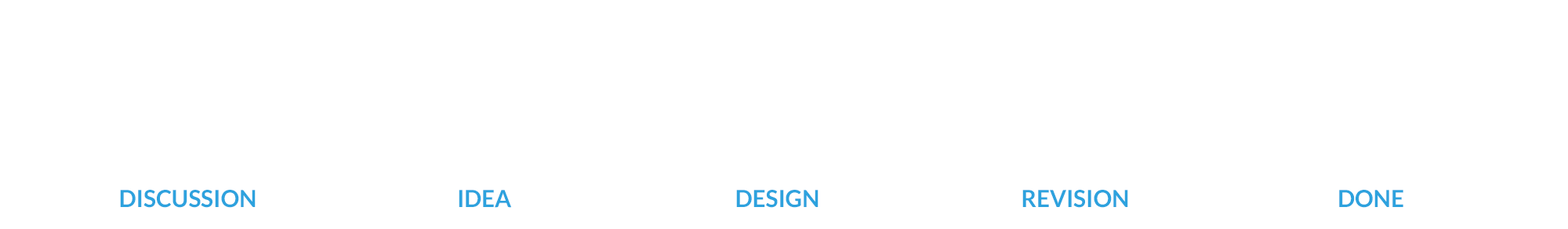
<style>
.page{position:relative;width:1568px;height:229px;background:#ffffff}
.page>*{position:absolute;margin:0}
.t1{font:23.5px "Lato-Bold";color:#2da2de}
</style>
<div class="page">
<p class="t1" style="left:120px;top:190px;width:136px;height:18px">DISCUSSION</p>
<p class="t1" style="left:459px;top:190px;width:52px;height:18px">IDEA</p>
<p class="t1" style="left:736px;top:190px;width:82px;height:18px">DESIGN</p>
<p class="t1" style="left:1022px;top:190px;width:106px;height:18px">REVISION</p>
<p class="t1" style="left:1339px;top:190px;width:64px;height:18px">DONE</p>
</div>
